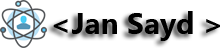
<style>
.page{position:relative;width:223px;height:50px;background:#ffffff}
.page>*{position:absolute;margin:0}
.t1{font:30px "SegoeUI-Bold";color:#000000}
</style>
<div class="page">
<p class="t1" style="left:53px;top:11px;width:167px;height:30px">&lt;Jan Sayd &gt;</p>
</div>
